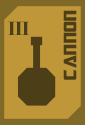
<style>
.page{position:relative;width:85px;height:125px;background:#bf9739}
.page>*{position:absolute;margin:0}
.t1{font:20px "TransformersMovie";letter-spacing:0.04em;color:#4c3f17}
.t2{font:20px "TimesNewRomanPS-BoldMT";letter-spacing:-0.04em;color:#4c3f17}
</style>
<div class="page">
<p class="t1" style="left:63px;top:10px;width:14px;height:70px;rotate:-90deg">Cannon</p>
<p class="t2" style="left:8px;top:21px;width:21px;height:14px">III</p>
</div>
